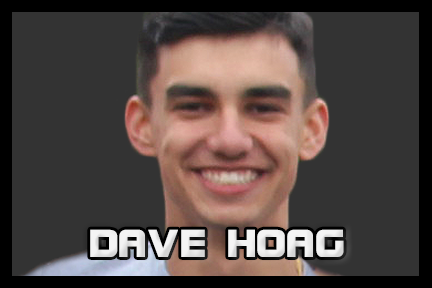
<style>
.page{position:relative;width:432px;height:288px;background:#333333}
.page>*{position:absolute;margin:0}
.t1{font:41.7px "BolsterBold";color:#f3f3f3}
</style>
<div class="page">
<p class="t1" style="left:90px;top:229px;width:254px;height:28px">DAVE HOAG</p>
</div>
